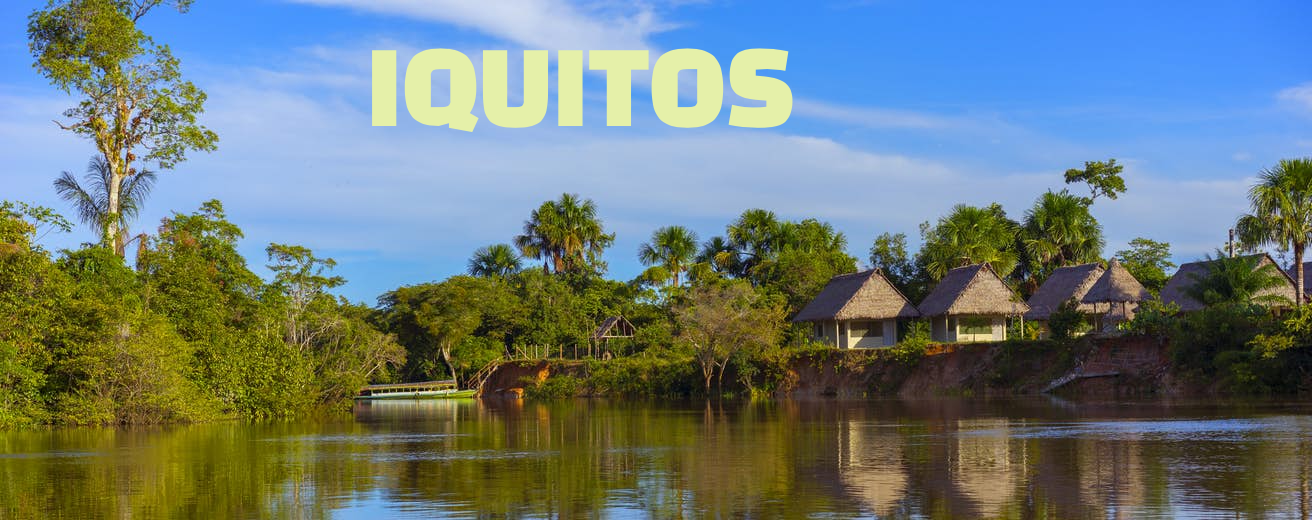
<style>
.page{position:relative;width:1312px;height:520px}
.page>*{position:absolute;margin:0}
.t1{font:101px "BlackHanSans-Regular";color:#e5f0a9}
</style>
<div class="page">
<p class="t1" style="left:372px;top:48px;width:421px;height:85px">IQUITOS</p>
</div>
